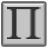
<style>
.page{position:relative;width:48px;height:48px;background:#c5c5c5}
.page>*{position:absolute;margin:0}
.t1{font:46.8px "TimesNewRomanPSMT";letter-spacing:-0.075em;color:#333333}
</style>
<div class="page">
<p class="t1" style="left:7px;top:7px;width:34px;height:32px">Π</p>
</div>
